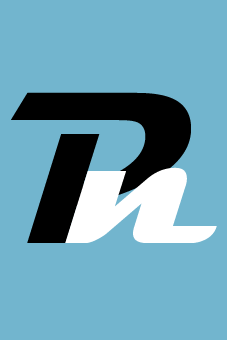
<style>
.page{position:relative;width:227px;height:340px;background:#72b5ce}
.page>*{position:absolute;margin:0}
.t1{font:218px "Magneto-Bold";color:#000000}
.t2{font:218px "Magneto-Bold";color:#ffffff}
</style>
<div class="page">
<p class="t1" style="left:11px;top:92px;width:180px;height:151px">P</p>
<p class="t2" style="left:65px;top:167px;width:152px;height:76px">n</p>
</div>
